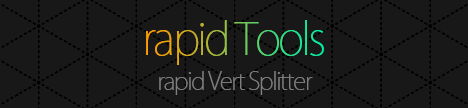
<style>
.page{position:relative;width:468px;height:108px;background:#181818}
.page>*{position:absolute;margin:0}
.t1{font:44.1px "KozGoPr6N-ExtraLight";letter-spacing:-0.06em}
.t2{font:24.1px "KozGoPr6N-ExtraLight";letter-spacing:-0.06em;color:#7f7f7f}
</style>
<div class="page">
<p class="t1" style="left:146px;top:20px;width:178px;height:45px">rapid Tools</p>
<p class="t2" style="left:159px;top:71px;width:154px;height:24px">rapid Vert Splitter</p>
</div>
